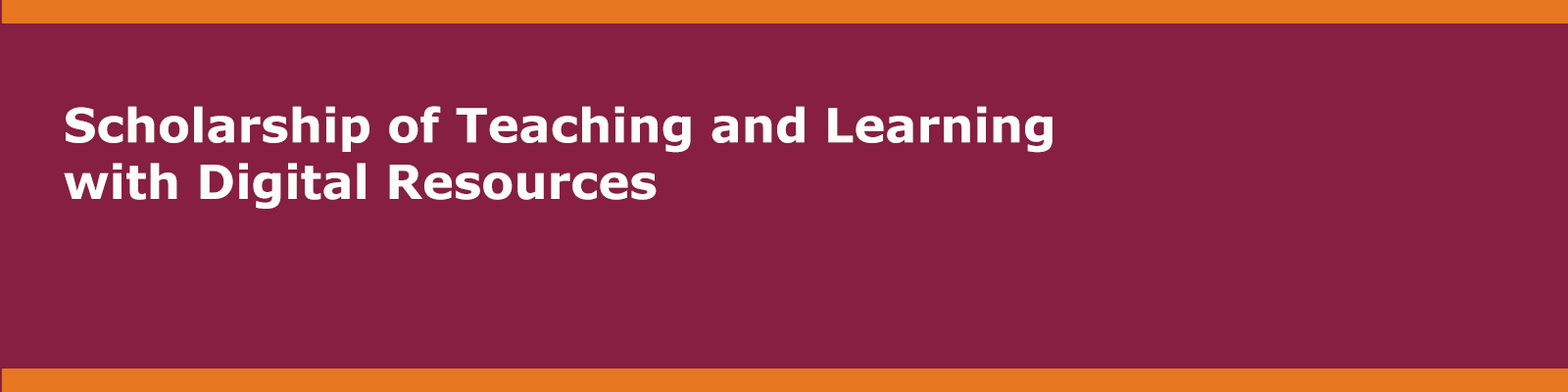
<style>
.page{position:relative;width:1568px;height:392px;background:#861f41}
.page>*{position:absolute;margin:0}
.t1{font:47px "Verdana-Bold";color:#fdfcfc}
</style>
<div class="page">
<p class="t1" style="left:64px;top:106px;width:989px;height:103px">Scholarship of Teaching and Learning <br>with Digital Resources</p>
</div>
